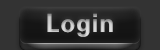
<style>
.page{position:relative;width:160px;height:50px;background:#333333}
.page>*{position:absolute;margin:0}
.t1{font:26px "HGCH_CNKI"}
</style>
<div class="page">
<p class="t1" style="left:47px;top:13px;width:66px;height:24px">Login</p>
</div>
